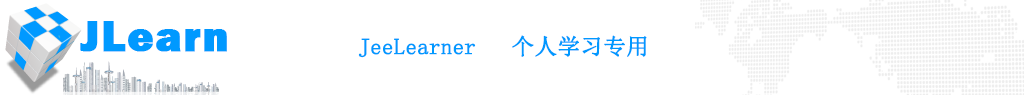
<style>
.page{position:relative;width:1024px;height:95px;background:#ffffff}
.page>*{position:absolute;margin:0}
.t1{font:44.5px "FranklinGothic-Heavy";letter-spacing:0.02em;color:#0099ff;font-weight:bold}
.t2{font:22.4px "SimSun";color:#0099ff;font-weight:bold}
</style>
<div class="page">
<p class="t1" style="left:80px;top:21px;width:147px;height:31px">JLearn</p>
<p class="t2" style="left:358px;top:35px;width:289px;height:23px">JeeLearner   个人学习专用</p>
</div>
